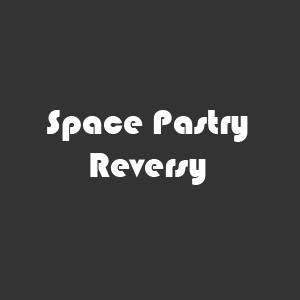
<style>
.page{position:relative;width:300px;height:300px;background:#333333}
.page>*{position:absolute;margin:0}
.t1{font:36px "Bauhaus93";color:#ffffff}
</style>
<div class="page">
<p class="t1" style="left:47px;top:110px;width:201px;height:75px;text-align:center">Space Pastry<br>Reversy</p>
</div>
